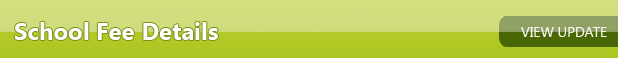
<style>
.page{position:relative;width:618px;height:58px}
.page>*{position:absolute;margin:0}
.t1{font:24px "SegoeUI-Bold";color:#fefefe}
.t2{font:14px "SegoeUI";color:#f6f7f1}
</style>
<div class="page">
<p class="t1" style="left:15px;top:22px;width:203px;height:18px">School Fee Details</p>
<p class="t2" style="left:521px;top:27px;width:86px;height:10px">VIEW UPDATE</p>
</div>
